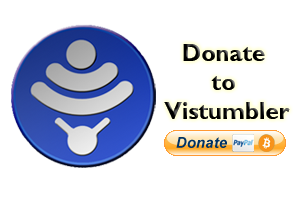
<style>
.page{position:relative;width:300px;height:200px;background:#ffffff}
.page>*{position:absolute;margin:0}
.t1{font:24px "GillSansMT-Bold";color:#000000}
</style>
<div class="page">
<p class="t1" style="left:164px;top:44px;width:126px;height:75px;text-align:center">Donate <br>to <br>Vistumbler</p>
<p class="t1" style="left:164px;top:44px;width:126px;height:75px;text-align:center">Donate <br>to <br>Vistumbler</p>
</div>
